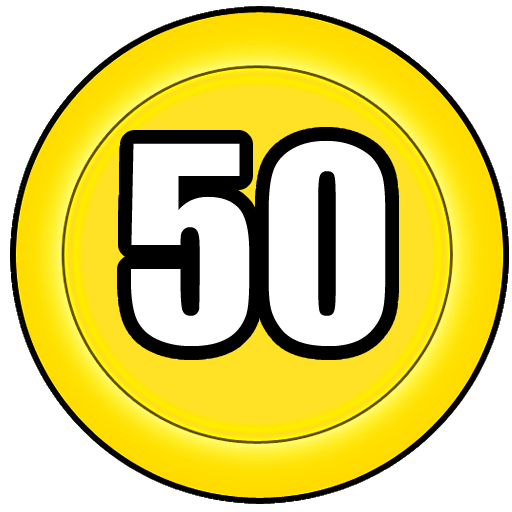
<style>
.page{position:relative;width:512px;height:512px;background:#ffffff}
.page>*{position:absolute;margin:0}
.t1{font:250px "Impact";letter-spacing:0.012em;color:#ffffff}
</style>
<div class="page">
<p class="t1" style="left:131px;top:140px;width:255px;height:206px">50</p>
</div>
